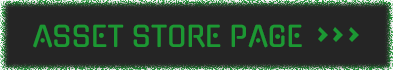
<style>
.page{position:relative;width:393px;height:70px;background:#252525}
.page>*{position:absolute;margin:0}
.t1{font:28px "Gugi-Regular";color:#1c9833}
</style>
<div class="page">
<p class="t1" style="left:33px;top:24px;width:269px;height:24px">ASSET STORE PAGE</p>
</div>
